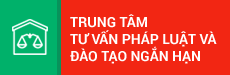
<style>
.page{position:relative;width:230px;height:75px;background:#f22613}
.page>*{position:absolute;margin:0}
.t1{font:14px/16.7px "Roboto-Bold";color:#ffffff;text-transform:uppercase}
</style>
<div class="page">
<p class="t1" style="left:70px;top:14px;width:147px;height:50px">Trung tâm <br>tư vấn pháp luật và<br>đào tạo ngắn hạn</p>
</div>
